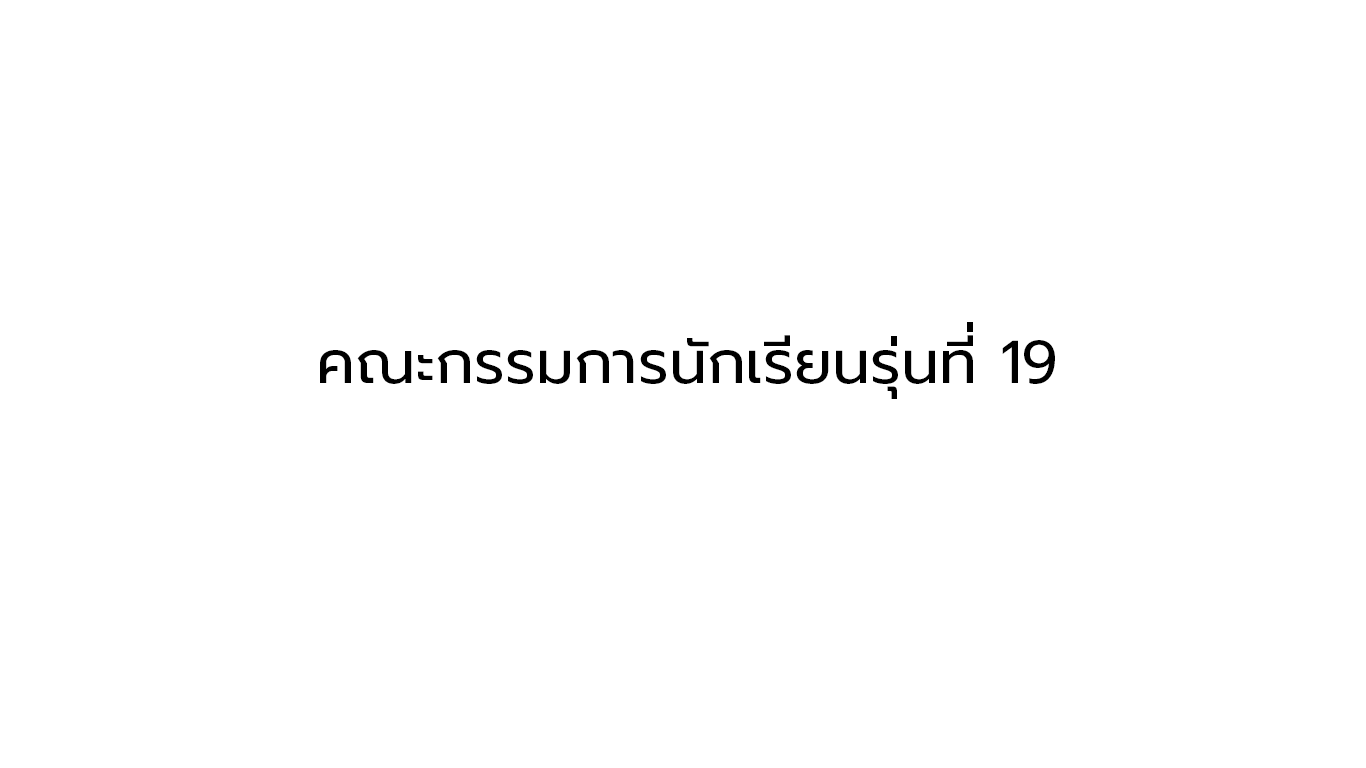
<style>
.page{position:relative;width:1366px;height:768px;background:#ffffff}
.page>*{position:absolute;margin:0}
.t1{font:60.5px "Prompt-Regular";color:#000000}
</style>
<div class="page">
<p class="t1" style="left:320px;top:322px;width:735px;height:77px">คณะกรรมการนักเรียนรุ่นที่ 19</p>
</div>
